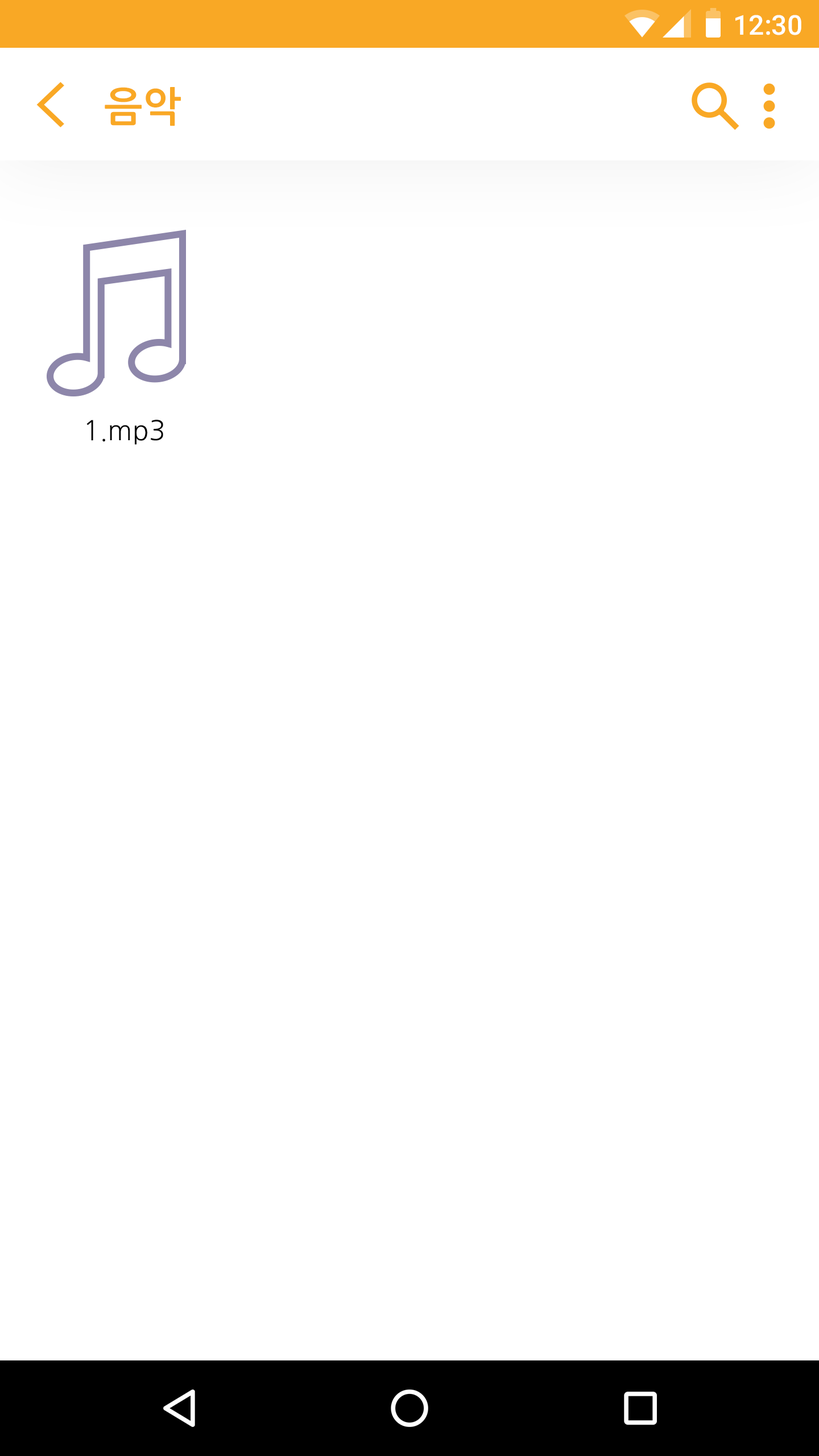
<style>
.page{position:relative;width:819px;height:1456px;background:#ffffff}
.page>*{position:absolute;margin:0}
.t1{font:27.3px "Roboto-Medium";color:#ffffff}
.t2{font:40.9px "NanumGothicBold";color:#f9a825}
.t3{font:27.3px "NanumGothic";color:#000000}
</style>
<div class="page">
<p class="t1" style="left:735px;top:15px;width:66px;height:20px">12:30</p>
<p class="t2" style="left:105px;top:87px;width:76px;height:39px">음악</p>
<p class="t3" style="left:86px;top:420px;width:77px;height:25px">1.mp3</p>
</div>
